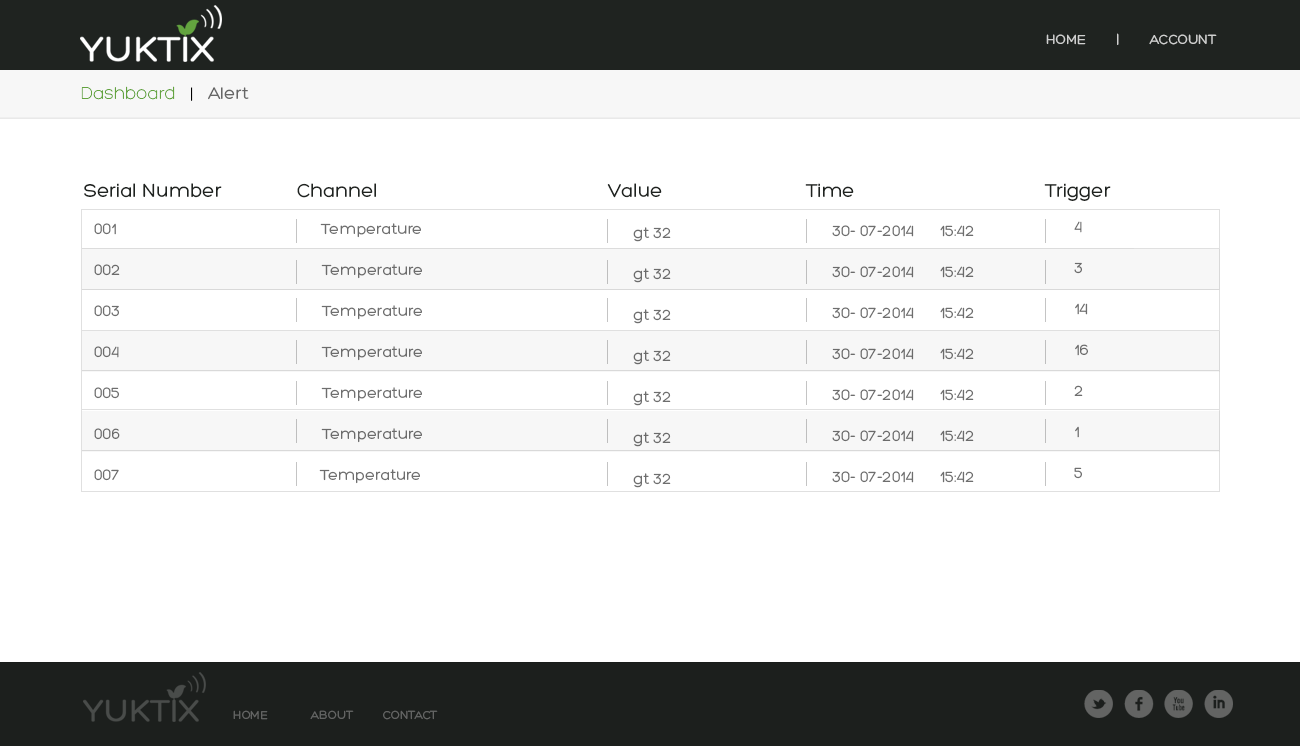
<style>
.page{position:relative;width:1300px;height:747px;background:#ffffff}
.page>*{position:absolute;margin:0}
.t1{font:14px "Hero";color:#cecfce;text-transform:uppercase}
.t2{font:18px "Hero-Light";color:#63a43f}
.t3{font:18px "Hero-Light";color:#000000}
.t4{font:18px "Hero";color:#666666}
.t5{font:20px "Hero";color:#1f2320}
.t6{font:16px/41px "Hero";color:#6e6e6e}
.t7{font:40.5px "Socialico";letter-spacing:0.2em;color:#636463}
.t8{font:12.2px "Hero";color:#636463;text-transform:uppercase}
</style>
<div class="page">
<p class="t1" style="left:1046px;top:33px;width:171px;height:12px">home        |        Account</p>
<p class="t2" style="left:81px;top:86px;width:168px;height:15px">Dashboard<span class="t3">   |   </span><span class="t4">Alert</span></p>
<p class="t5" style="left:84px;top:183px;width:138px;height:15px">Serial Number</p>
<p class="t5" style="left:297px;top:183px;width:79px;height:15px">Channel</p>
<p class="t5" style="left:607px;top:183px;width:55px;height:15px">Value</p>
<p class="t5" style="left:805px;top:183px;width:49px;height:15px">Time</p>
<p class="t5" style="left:1044px;top:183px;width:67px;height:18px">Trigger</p>
<p class="t6" style="left:1074px;top:221px;width:14px;height:258px">4<br>3<br>14<br>16<br>2<br>1<br>5</p>
<p class="t6" style="left:94px;top:223px;width:328px;height:261px">001                                               Temperature<br>002                                             Temperature<br>003                                             Temperature<br>004                                             Temperature<br>005                                             Temperature<br>006                                             Temperature<br>007                                              Temperature</p>
<p class="t6" style="left:633px;top:227px;width:38px;height:261px">gt 32<br>gt 32<br>gt 32<br>gt 32<br>gt 32<br>gt 32<br>gt 32</p>
<p class="t6" style="left:832px;top:225px;width:142px;height:258px">30- 07-2014      15:42<br>30- 07-2014      15:42<br>30- 07-2014      15:42<br>30- 07-2014      15:42<br>30- 07-2014      15:42<br>30- 07-2014      15:42<br>30- 07-2014      15:42</p>
<p class="t7" style="left:1084px;top:690px;width:149px;height:28px">lfxi</p>
<p class="t8" style="left:233px;top:710px;width:205px;height:10px">home             About         Contact</p>
</div>
